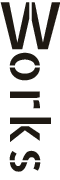
<style>
.page{position:relative;width:60px;height:180px;background:#ffffff}
.page>*{position:absolute;margin:0}
.t1{font:65px "AllertaStencil-Regular";letter-spacing:0.05em;color:#1e1913}
.t2{font:53.9px "AllertaStencil-Regular";letter-spacing:0.05em;color:#1e1913}
</style>
<div class="page">
<p class="t1" style="left:0px;top:2px;width:61px;height:48px">W</p>
<p class="t2" style="left:9px;top:52px;width:42px;height:120px;rotate:90deg">orks</p>
</div>
